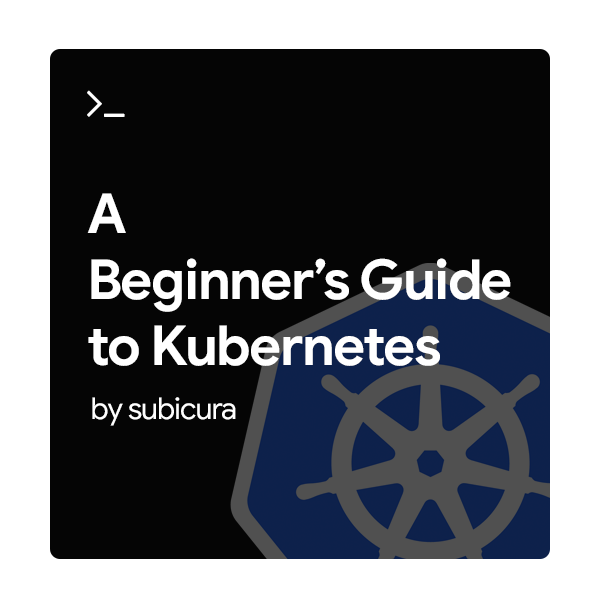
<style>
.page{position:relative;width:600px;height:600px;background:#050505}
.page>*{position:absolute;margin:0}
.t1{font:55px "GoogleSans-Bold";letter-spacing:-0.03em;color:#ffffff}
.t2{font:30px "GoogleSans-Regular";letter-spacing:-0.03em;color:#ffffff}
</style>
<div class="page">
<p class="t1" style="left:87px;top:193px;width:424px;height:173px">A<br>Beginner’s Guide<br>to Kubernetes</p>
<p class="t2" style="left:92px;top:397px;width:144px;height:29px">by subicura</p>
</div>
